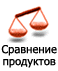
<style>
.page{position:relative;width:58px;height:71px;background:#ffffff}
.page>*{position:absolute;margin:0}
.t1{font:11px/12px "Tahoma";letter-spacing:0.01em;color:#000000}
</style>
<div class="page">
<p class="t1" style="left:1px;top:45px;width:56px;height:23px;text-align:center">Сравнение<br>продуктов</p>
</div>
